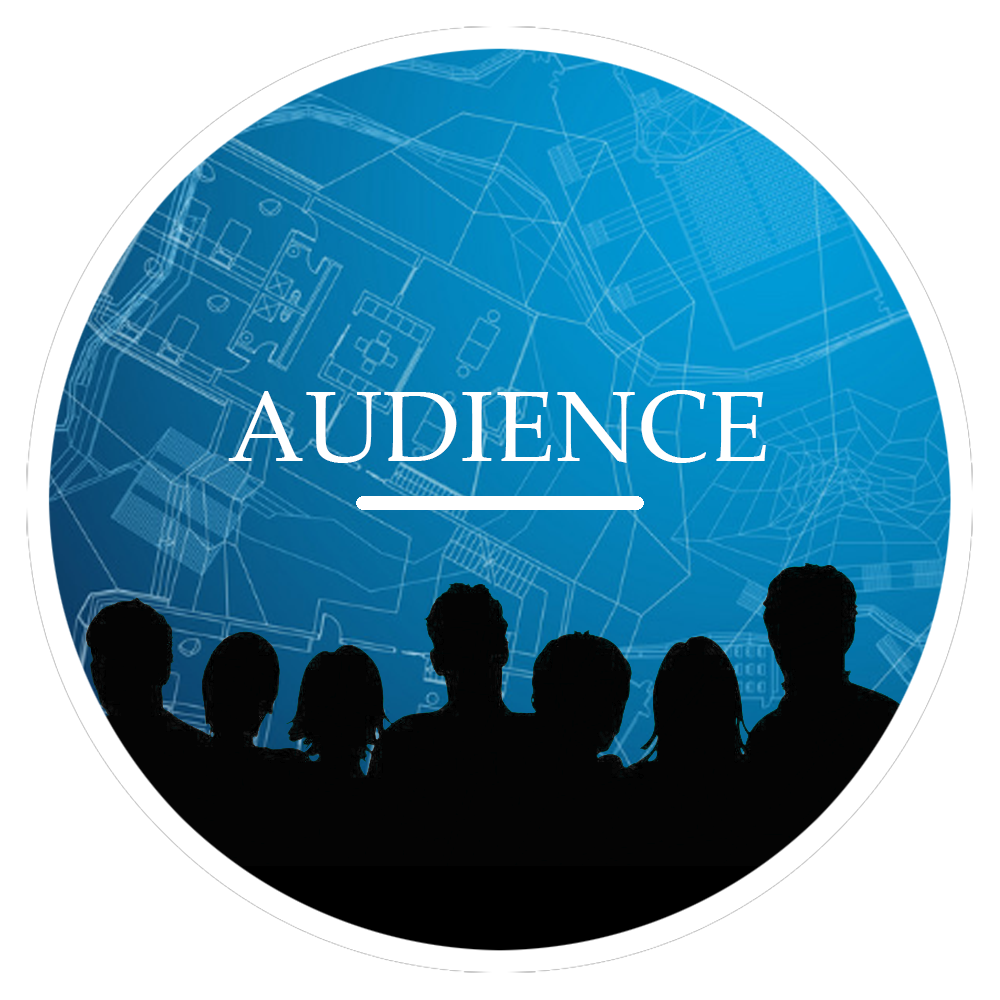
<style>
.page{position:relative;width:1000px;height:1000px;background:#ffffff}
.page>*{position:absolute;margin:0}
.t1{font:100px "PalatinoLinotype-Roman";color:#ffffff}
</style>
<div class="page">
<p class="t1" style="left:228px;top:390px;width:538px;height:73px">AUDIENCE</p>
</div>
